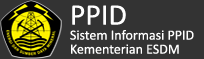
<style>
.page{position:relative;width:204px;height:59px;background:#333333}
.page>*{position:absolute;margin:0}
.t1{font:30px "Calibri";color:#ffffff}
.t2{font:14px "Calibri";color:#ffffff}
</style>
<div class="page">
<p class="t1" style="left:72px;top:5px;width:54px;height:20px">PPID</p>
<p class="t2" style="left:70px;top:30px;width:124px;height:10px">Sistem Informasi PPID</p>
<p class="t2" style="left:71px;top:44px;width:108px;height:10px">Kementerian ESDM</p>
</div>
